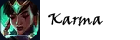
<style>
.page{position:relative;width:140px;height:40px;background:#ffffff}
.page>*{position:absolute;margin:0}
.t1{font:12px "VinerHandITC";color:#000000}
</style>
<div class="page">
<p class="t1" style="left:48px;top:13px;width:55px;height:14px">Karma</p>
</div>
